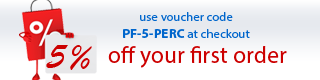
<style>
.page{position:relative;width:320px;height:80px;background:#ffffff}
.page>*{position:absolute;margin:0}
.t1{font:12.5px/16.7px "MyriadPro-Regular";letter-spacing:0.01em;color:#0066cc}
.t2{font:13.3px/16.7px "MyriadPro-Bold";letter-spacing:0.01em;color:#0066cc}
.t3{font:40px "BrushScriptMT";letter-spacing:0.01em;color:#cc0000}
.t4{font:23.3px "MyriadPro-Regular";letter-spacing:0.01em;color:#cc0000}
</style>
<div class="page">
<p class="t1" style="left:123px;top:12px;width:127px;height:26px;text-align:center">use voucher code<br><span class="t2">PF-5-PERC</span> at checkout</p>
<p class="t3" style="left:46px;top:45px;width:46px;height:25px">5%</p>
<p class="t4" style="left:108px;top:46px;width:179px;height:22px">off your first order</p>
</div>
